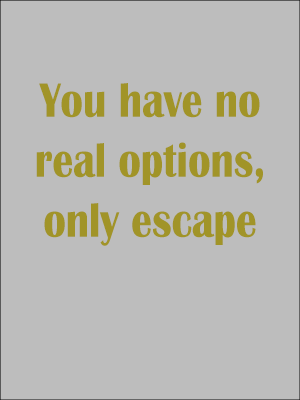
<style>
.page{position:relative;width:300px;height:400px;background:#bdbdbd}
.page>*{position:absolute;margin:0}
.t1{font:50px "BritannicBold";color:#a19428;scale:0.83 1}
</style>
<div class="page">
<p class="t1" style="left:36px;top:83px;width:227px;height:163px;text-align:center">You have no real options, only escape</p>
</div>
